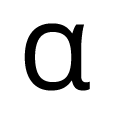
<style>
.page{position:relative;width:114px;height:114px;background:#ffffff}
.page>*{position:absolute;margin:0}
.t1{font:120.6px "OpenSans";color:#000000}
</style>
<div class="page">
<p class="t1" style="left:24px;top:23px;width:66px;height:68px">α</p>
</div>
